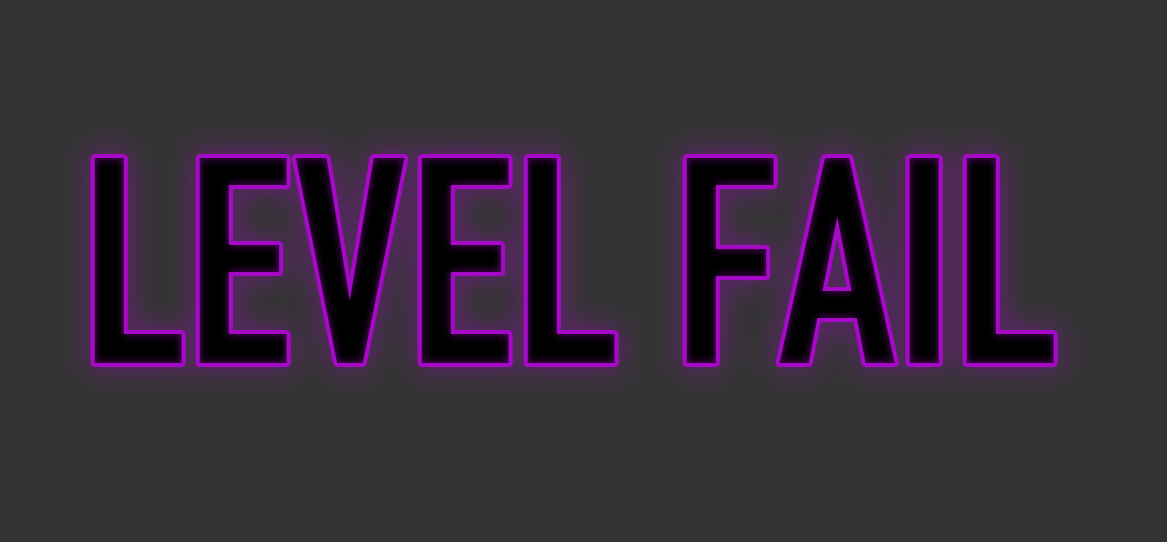
<style>
.page{position:relative;width:1167px;height:542px;background:#333333}
.page>*{position:absolute;margin:0}
.t1{font:285.8px "DINEngschrift";color:#040005}
</style>
<div class="page">
<p class="t1" style="left:94px;top:158px;width:960px;height:206px">LEVEL FAIL</p>
</div>
